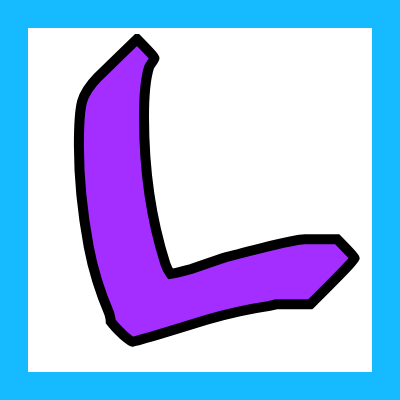
<style>
.page{position:relative;width:400px;height:400px;background:#ffffff}
.page>*{position:absolute;margin:0}
.t1{font:350px "GongNormal";color:#a42eff}
</style>
<div class="page">
<p class="t1" style="left:73px;top:34px;width:287px;height:313px">L</p>
</div>
